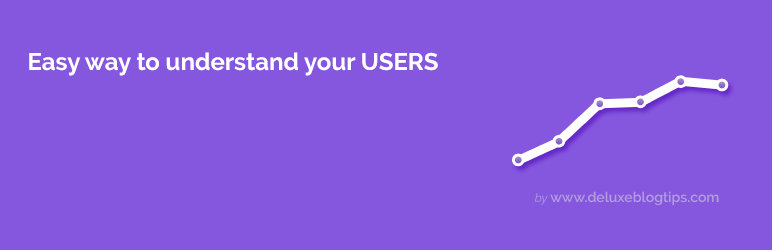
<style>
.page{position:relative;width:772px;height:250px;background:#8556de}
.page>*{position:absolute;margin:0}
.t1{font:24px "Raleway-Bold";color:#ffffff}
.t2{font:14px "Raleway-SemiBold";color:#b49ce1}
.t3{font:12px "Raleway-Italic";color:#b49ce1}
</style>
<div class="page">
<p class="t1" style="left:29px;top:52px;width:409px;height:24px">Easy way to understand your USERS</p>
<p class="t2" style="left:534px;top:191px;width:185px;height:14px"><span class="t3">by </span>www.deluxeblogtips.com</p>
</div>
